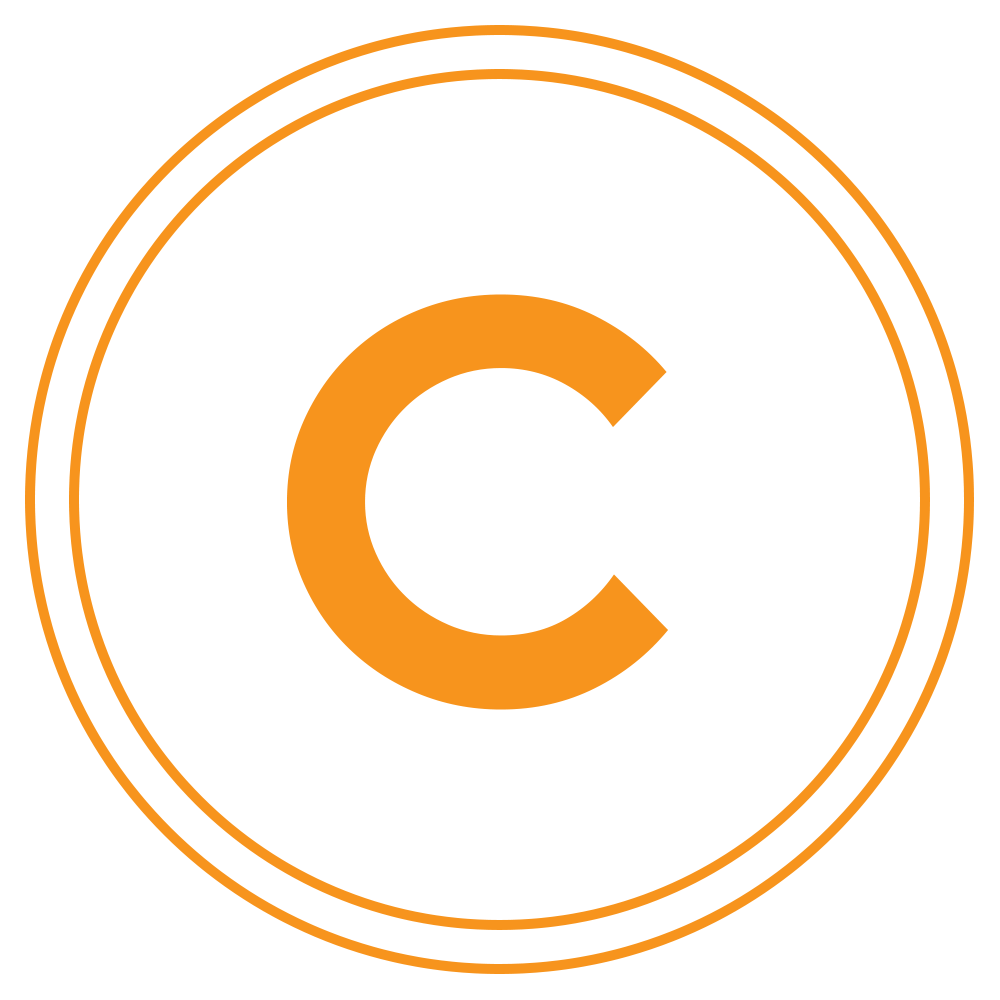
<style>
.page{position:relative;width:1000px;height:1000px;background:#ffffff}
.page>*{position:absolute;margin:0}
.t1{font:500px "KeepCalm-Medium";color:#f7941d}
</style>
<div class="page">
<p class="t1" style="left:287px;top:294px;width:381px;height:416px">C</p>
</div>
